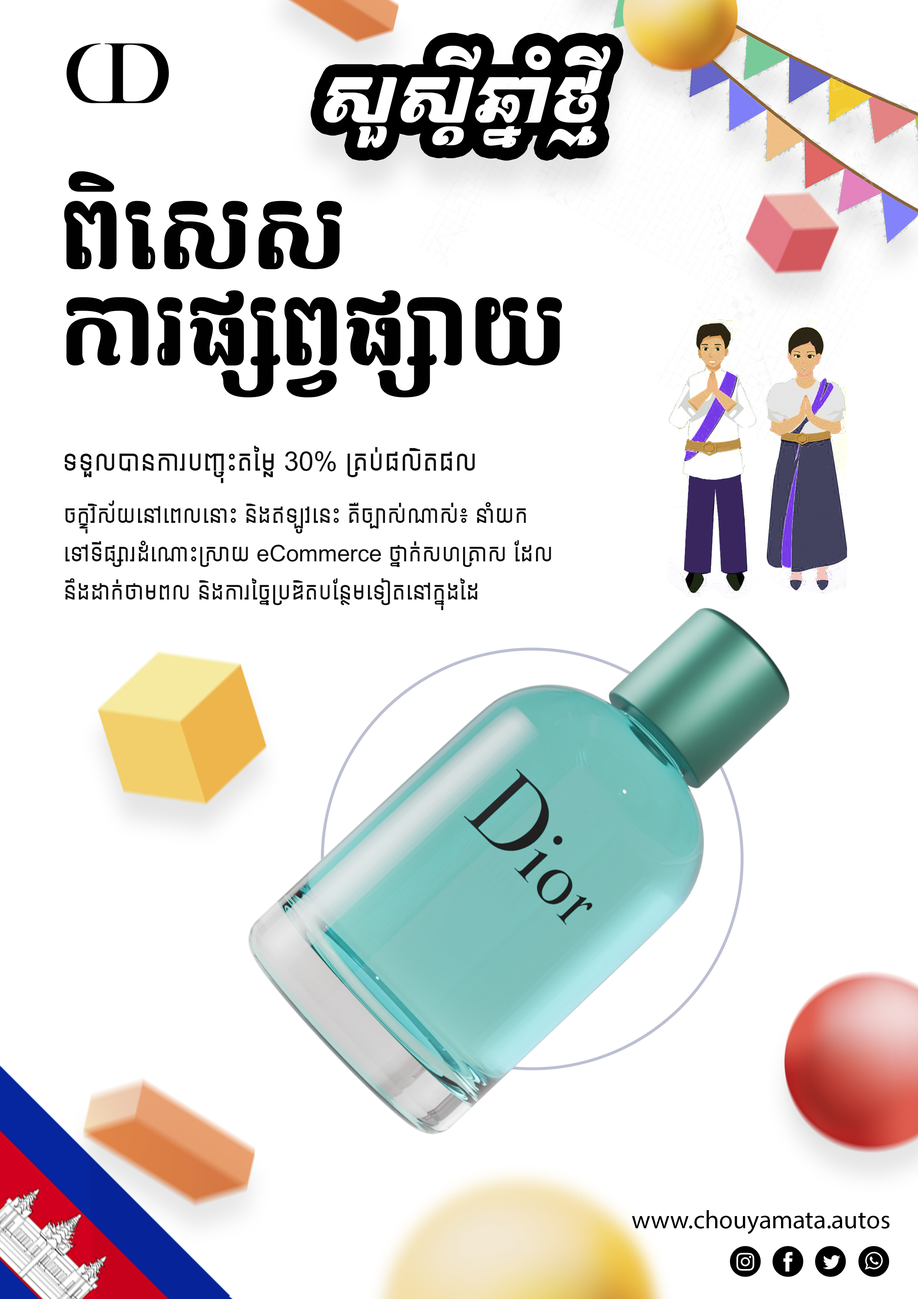
<style>
.page{position:relative;width:918px;height:1299px;background:#ffffff}
.page>*{position:absolute;margin:0}
.t1{font:71.6px "Kh-Ang-ChittBous";color:#ffffff}
.t2{font:93.1px/96.3px "Romnea";color:#010101}
.t3{font:26.8px "AKbalthomKhmerNew";color:#0e0e0e}
.t4{font:23px/38.3px "AKbalthomKhmerNew";color:#0e0e0e}
.t5{font:25.5px "MyriadPro-Regular";color:#000000}
</style>
<div class="page">
<p class="t1" style="left:324px;top:46px;width:286px;height:102px">សួស្តីឆ្នាំថ្មី</p>
<p class="t2" style="left:64px;top:171px;width:498px;height:227px">ពិសេស<br>ការផ្សព្វផ្សាយ</p>
<p class="t3" style="left:65px;top:445px;width:410px;height:38px">ទទួលបានការបញ្ចុះតម្លៃ 30% គ្រប់ផលិតផល</p>
<p class="t4" style="left:65px;top:500px;width:486px;height:110px">ចក្ខុវិស័យនៅពេលនោះ និងឥឡូវនេះ គឺច្បាស់ណាស់៖ នាំយកទៅទីផ្សារដំណោះស្រាយ eCommerce ថ្នាក់សហគ្រាស ដែលនឹងដាក់ថាមពល និងការច្នៃប្រឌិតបន្ថែមទៀតនៅក្នុងដៃ</p>
<p class="t5" style="left:632px;top:1210px;width:258px;height:24px">www.chouyamata.autos</p>
</div>
